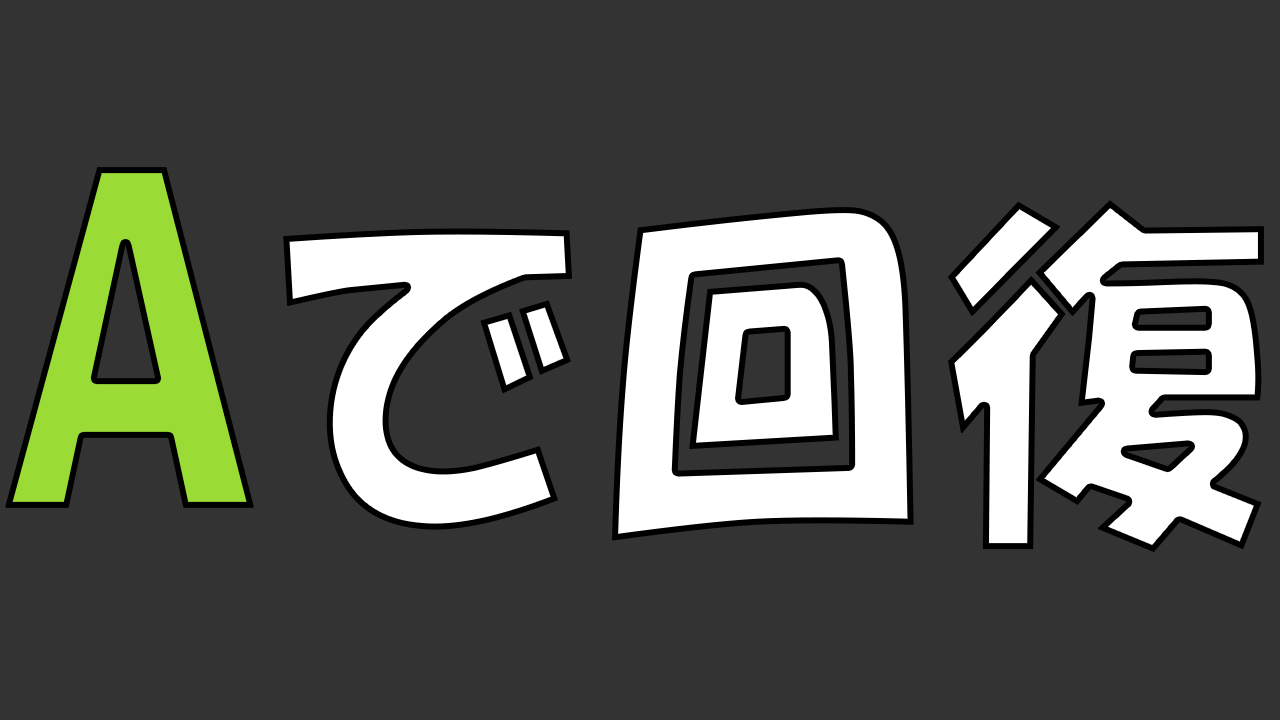
<style>
.page{position:relative;width:1280px;height:720px;background:#333333}
.page>*{position:absolute;margin:0}
.t1{font:365.7px "HGSSoeiKakupoptai";color:#ffffff;font-weight:bold;scale:0.9 1}
.t2{font:507.9px "FranklinGothic-DemiCond";color:#9bdb35;font-weight:bold;scale:0.9 1}
</style>
<div class="page">
<p class="t1" style="left:5px;top:167px;width:1259px;height:386px"><span class="t2">A</span>で回復</p>
</div>
